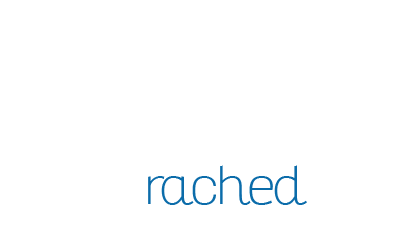
<style>
.page{position:relative;width:400px;height:252px;background:#ffffff}
.page>*{position:absolute;margin:0}
.t1{font:53.2px "Altair-Thin";letter-spacing:-0.05em;color:#0b6caa}
</style>
<div class="page">
<p class="t1" style="left:148px;top:165px;width:159px;height:40px">rached</p>
</div>
